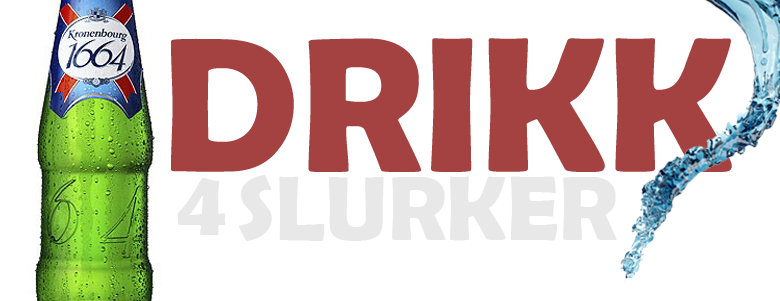
<style>
.page{position:relative;width:780px;height:301px;background:#ffffff}
.page>*{position:absolute;margin:0}
.t1{font:192.8px "BerlinSansFBDemi-Bold";color:#a44242}
.t2{font:91.9px "BerlinSansFBDemi-Bold";color:#e8e8e8}
</style>
<div class="page">
<p class="t1" style="left:171px;top:38px;width:561px;height:134px">DRIKK</p>
<p class="t2" style="left:177px;top:178px;width:49px;height:57px">4</p>
<p class="t2" style="left:239px;top:175px;width:378px;height:66px">SLURKER</p>
</div>
